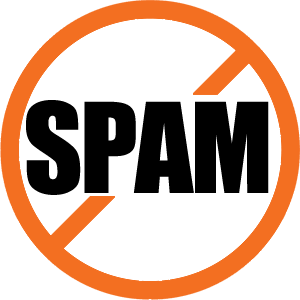
<style>
.page{position:relative;width:300px;height:300px;background:#ffffff}
.page>*{position:absolute;margin:0}
.t1{font:115px "Impact";letter-spacing:-0.025em;color:#000000}
</style>
<div class="page">
<p class="t1" style="left:26px;top:100px;width:243px;height:95px">SPAM</p>
</div>
